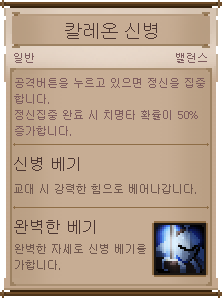
<style>
.page{position:relative;width:222px;height:298px;background:#c7ad94}
.page>*{position:absolute;margin:0}
.t1{font:18px "Gulim";color:#4b3531}
.t2{font:11px "Gulim";color:#7e5c5e}
.t3{font:11px/16px "Gulim";color:#7e5c5e}
.t4{font:16px "Gulim";color:#4b3531}
.t5{font:11px "Gulim";color:#70574e}
.t6{font:11px/16px "Gulim";color:#70574e}
</style>
<div class="page">
<p class="t1" style="left:65px;top:23px;width:92px;height:16px">칼레온 신병</p>
<p class="t2" style="left:14px;top:53px;width:20px;height:10px">일반</p>
<p class="t2" style="left:176px;top:53px;width:31px;height:10px">밸런스</p>
<p class="t3" style="left:14px;top:78px;width:191px;height:58px">공격버튼을 누르고 있으면 정신을 집중<br>합니다.<br>정신집중 완료 시 치명타 확률이 50% <br>증가합니다.</p>
<p class="t4" style="left:14px;top:157px;width:65px;height:14px">신병 베기</p>
<p class="t5" style="left:14px;top:184px;width:182px;height:10px">교대 시 강력한 힘으로 베어나갑니다.</p>
<p class="t4" style="left:14px;top:220px;width:81px;height:14px">완벽한 베기</p>
<p class="t6" style="left:15px;top:244px;width:131px;height:26px">완벽한 자세로 신병 베기를<br>가합니다.</p>
</div>
